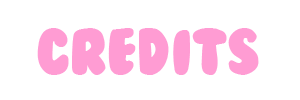
<style>
.page{position:relative;width:300px;height:100px;background:#ffffff}
.page>*{position:absolute;margin:0}
.t1{font:60px "BubbleGum";color:#ff9cd3}
</style>
<div class="page">
<p class="t1" style="left:37px;top:28px;width:222px;height:47px">credits</p>
</div>
